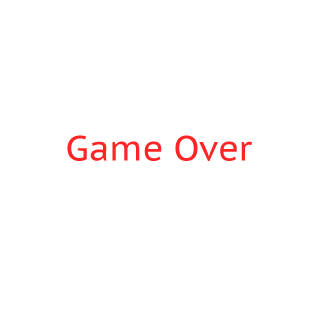
<style>
.page{position:relative;width:320px;height:320px;background:#ffffff}
.page>*{position:absolute;margin:0}
.t1{font:35px "PTSans-Caption";color:#fd2525}
</style>
<div class="page">
<p class="t1" style="left:67px;top:135px;width:185px;height:26px">Game Over</p>
</div>
